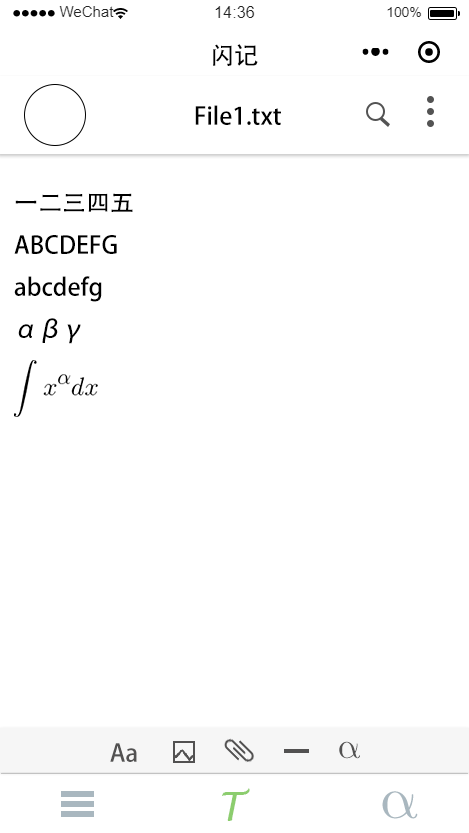
<style>
.page{position:relative;width:469px;height:833px;background:#ffffff}
.page>*{position:absolute;margin:0}
.t1{font:24px "AdobeHeitiStd-Regular";color:#000000}
.t2{font:24px "AdobeHeitiStd-Regular";color:#525151}
.t3{font:36px "LatinModernMath-Regular";color:#525151}
.t4{font:40px "LucidaHandwriting-Italic";color:#8ccd6e}
.t5{font:60px "LatinModernMath-Regular";color:#a9b7bf}
</style>
<div class="page">
<p class="t1" style="left:213px;top:44px;width:45px;height:22px">闪记</p>
<p class="t1" style="left:195px;top:105px;width:86px;height:20px">File1.txt</p>
<p class="t1" style="left:14px;top:193px;width:119px;height:151px">一二三四五<br>ABCDEFG<br>abcdefg<br>αβγ</p>
<p class="t2" style="left:110px;top:743px;width:27px;height:19px">Aa</p>
<p class="t3" style="left:339px;top:741px;width:21px;height:18px">α</p>
<p class="t4" style="left:222px;top:788px;width:28px;height:33px">T</p>
<p class="t5" style="left:382px;top:791px;width:36px;height:28px">α</p>
</div>
